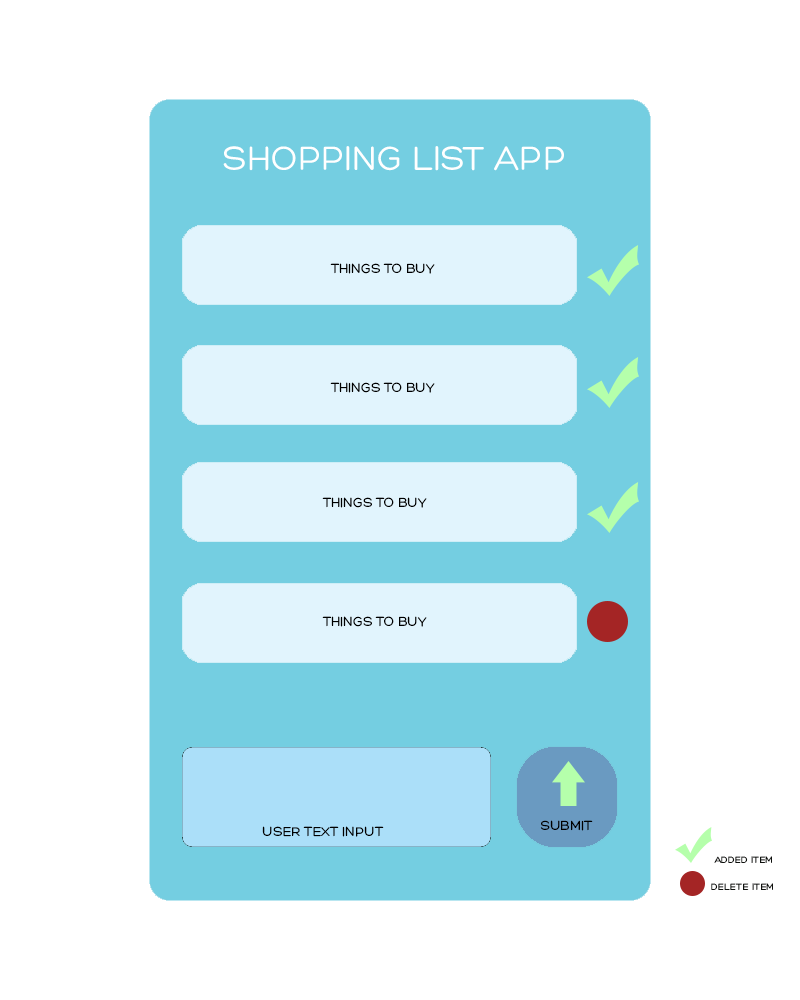
<style>
.page{position:relative;width:800px;height:1000px;background:#ffffff}
.page>*{position:absolute;margin:0}
.t1{font:36px "Hero";color:#ffffff;font-variant:small-caps}
.t2{font:14px "Hero";color:#000000;font-variant:small-caps}
.t3{font:14px "Hero";color:#0e100d;font-variant:small-caps}
</style>
<div class="page">
<p class="t1" style="left:223px;top:146px;width:341px;height:25px">SHOPPING LIST APP</p>
<p class="t2" style="left:330px;top:263px;width:105px;height:11px">THINGS TO BUY</p>
<p class="t2" style="left:330px;top:382px;width:105px;height:11px">THINGS TO BUY</p>
<p class="t2" style="left:322px;top:497px;width:105px;height:11px">THINGS TO BUY</p>
<p class="t2" style="left:322px;top:616px;width:105px;height:11px">THINGS TO BUY</p>
<p class="t2" style="left:540px;top:820px;width:53px;height:11px">SUBMIT</p>
<p class="t2" style="left:262px;top:826px;width:122px;height:11px">USER TEXT INPUT</p>
<p class="t3" style="left:714px;top:856px;width:58px;height:7px">added item</p>
<p class="t3" style="left:711px;top:883px;width:62px;height:7px">delete item</p>
</div>
